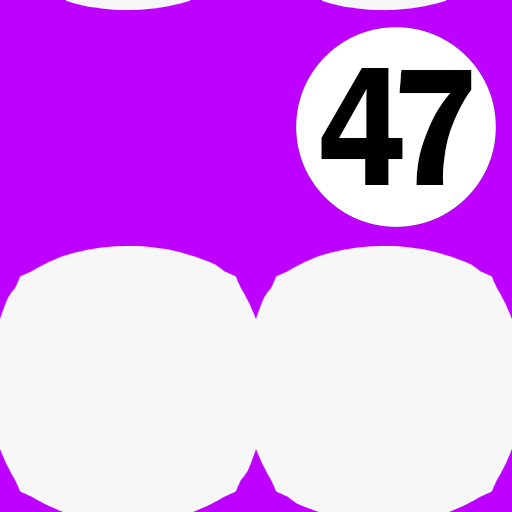
<style>
.page{position:relative;width:512px;height:512px;background:#f7f7f7}
.page>*{position:absolute;margin:0}
.t1{font:172.5px "FranklinGothic-Demi";letter-spacing:-0.05em;color:#010101;scale:0.87 1}
</style>
<div class="page">
<p class="t1" style="left:321px;top:68px;width:151px;height:117px">47</p>
</div>
